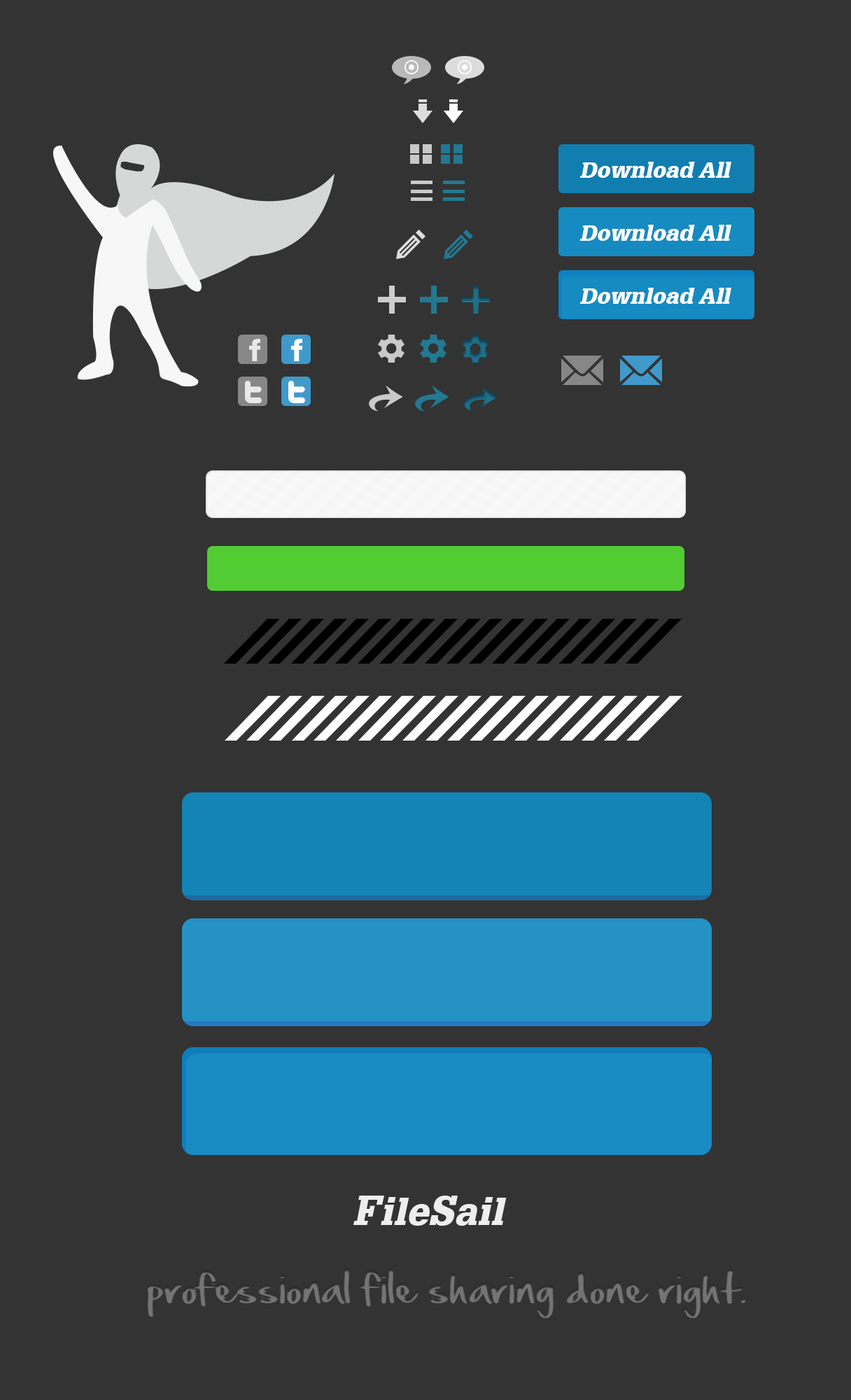
<style>
.page{position:relative;width:851px;height:1400px;background:#333333}
.page>*{position:absolute;margin:0}
.t1{font:21.4px "GlyphaLT-BlackOblique";letter-spacing:0.01em;color:#ffffff}
.t2{font:37px "GlyphaLT-BlackOblique";letter-spacing:0.025em;color:#eeeeee}
.t3{font:40.8px "GlyphaLT-BlackOblique";letter-spacing:0.025em;color:#eeeeee}
.t4{font:37px "HandOfSean";color:#747474}
</style>
<div class="page">
<p class="t1" style="left:580px;top:162px;width:152px;height:16px">Download All</p>
<p class="t1" style="left:580px;top:225px;width:152px;height:16px">Download All</p>
<p class="t1" style="left:580px;top:288px;width:152px;height:16px">Download All</p>
<p class="t2" style="left:353px;top:1196px;width:154px;height:30px"><span class="t3">F</span>ile<span class="t3">S</span>ail</p>
<p class="t4" style="left:147px;top:1268px;width:600px;height:51px">professional file sharing done right.</p>
</div>
